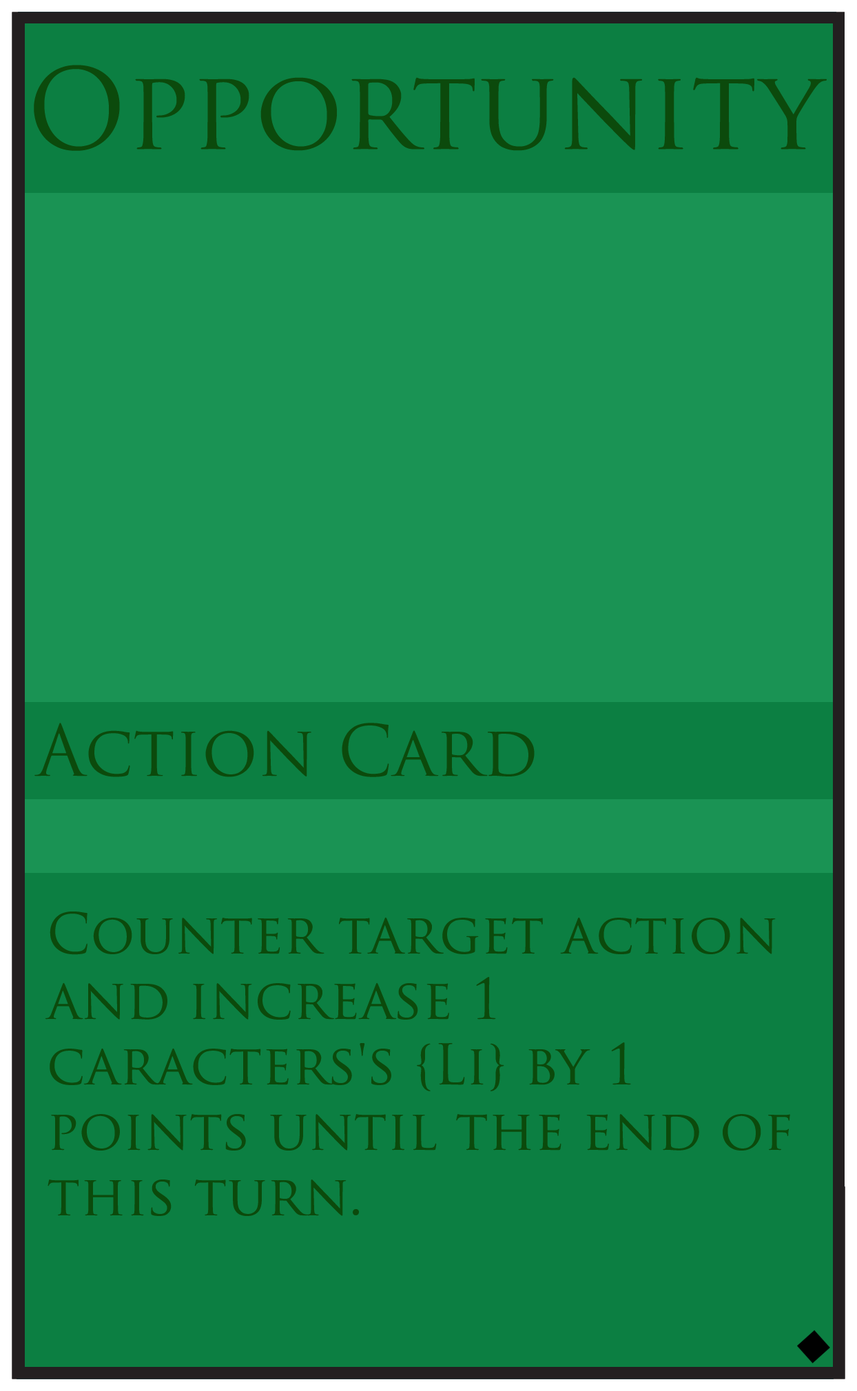
<style>
.page{position:relative;width:857px;height:1391px;background:#0c7f42}
.page>*{position:absolute;margin:0}
.t1{font:109.1px "TrajanPro-Regular";color:#0c4a0c}
.t2{font:68.9px "TrajanPro-Regular";color:#0c4a0c}
.t3{font:54.5px "TrajanPro-Regular";color:#0c4a0c}
</style>
<div class="page">
<p class="t1" style="left:34px;top:65px;width:793px;height:86px">Opportunity</p>
<p class="t2" style="left:34px;top:723px;width:501px;height:54px">Action Card</p>
<p class="t3" style="left:45px;top:912px;width:745px;height:304px">Counter target action <br>and increase 1 <br>caracters's {Li} by 1 <br>points until the end of <br>this turn.</p>
</div>
